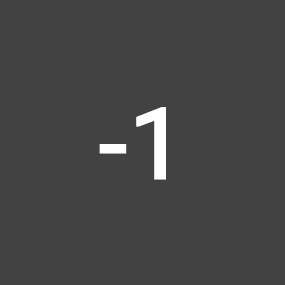
<style>
.page{position:relative;width:285px;height:285px;background:#424242}
.page>*{position:absolute;margin:0}
.t1{font:99px "Roboto-Regular";color:#ffffff;font-weight:bold}
</style>
<div class="page">
<p class="t1" style="left:99px;top:107px;width:67px;height:73px">-1</p>
</div>
